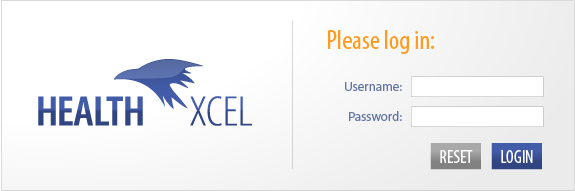
<style>
.page{position:relative;width:575px;height:191px;background:#ffffff}
.page>*{position:absolute;margin:0}
.t1{font:27px "MyriadPro-Cond";color:#ff9b20}
.t2{font:15px "MyriadPro-Cond";color:#ffffff}
.t3{font:13px "MyriadPro-Regular";color:#6275a3}
.t4{font:18px "MyriadPro-Cond";color:#ffffff}
</style>
<div class="page">
<p class="t1" style="left:328px;top:30px;width:106px;height:24px">Please log in:</p>
<p class="t2" style="left:346px;top:34px;width:92px;height:11px">PLATFORM UPDATES</p>
<p class="t3" style="left:345px;top:82px;width:57px;height:9px">Username:</p>
<p class="t3" style="left:349px;top:111px;width:53px;height:10px">Password:</p>
<p class="t4" style="left:440px;top:150px;width:33px;height:13px">RESET</p>
<p class="t4" style="left:501px;top:150px;width:32px;height:13px">LOGIN</p>
</div>
